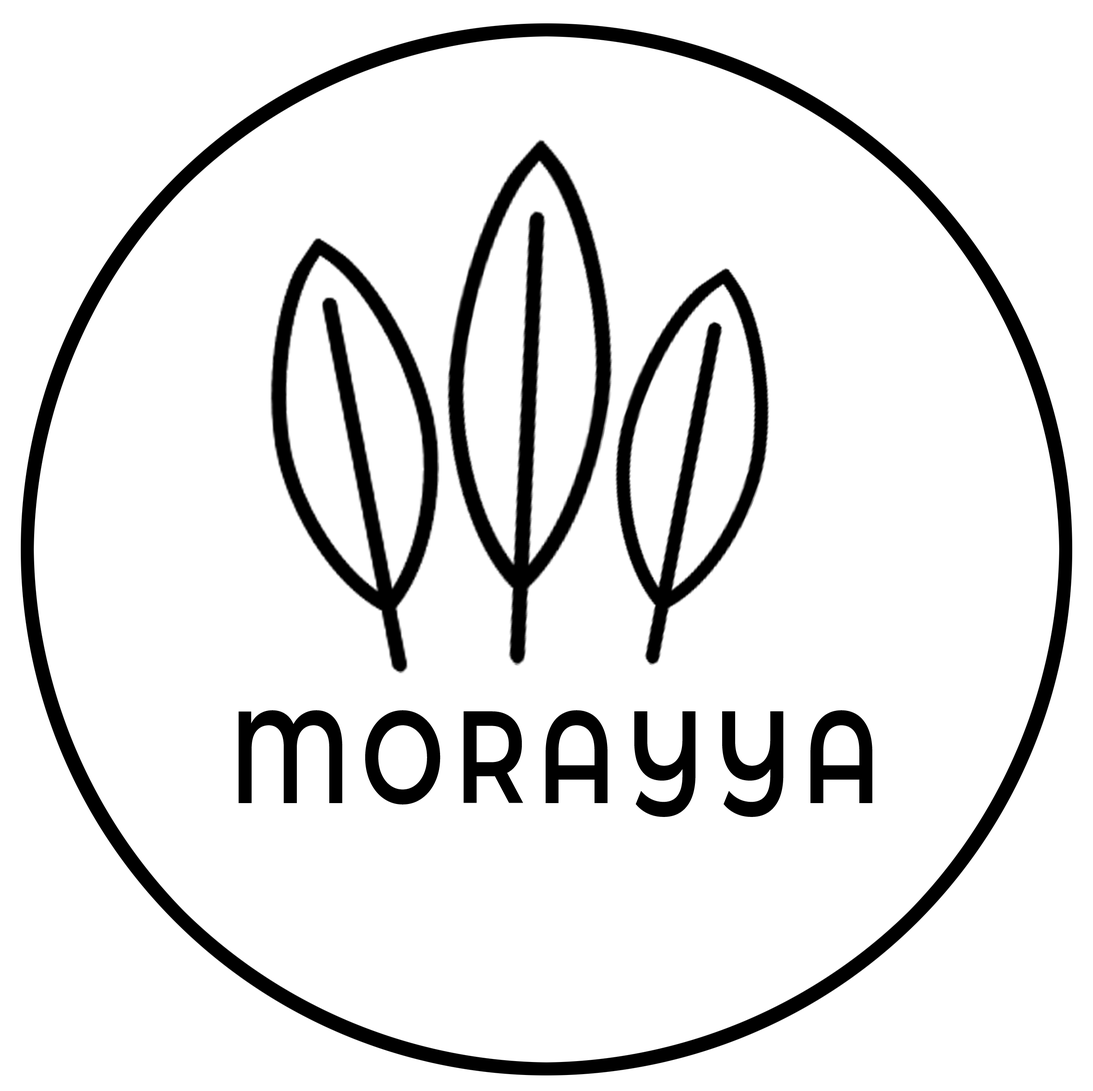
<style>
.page{position:relative;width:1093px;height:1091px;background:#ffffff}
.page>*{position:absolute;margin:0}
.t1{font:130.6px "MontserratAlternates-SemiBold";letter-spacing:0.1em;color:#000000;scale:0.76 1}
</style>
<div class="page">
<p class="t1" style="left:238px;top:710px;width:635px;height:107px">MORAYYA</p>
</div>
